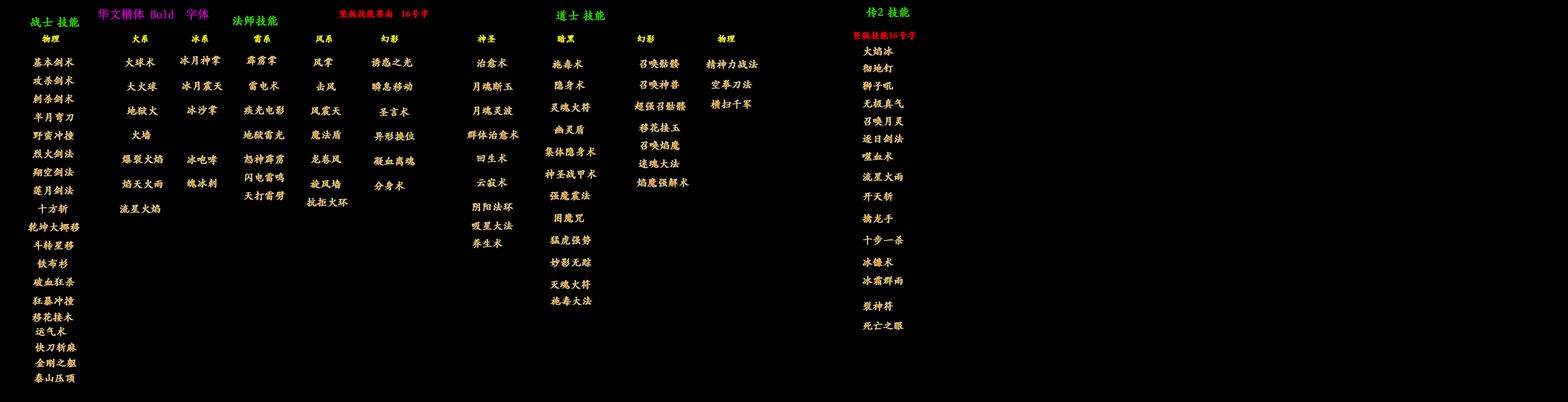
<style>
.page{position:relative;width:1568px;height:402px;background:#000000}
.page>*{position:absolute;margin:0}
.t1{font:11.8px "STKaiti-SC-Bold";color:#34d800;font-weight:bold}
.t2{font:11.8px "SimSun";color:#d900d9;font-weight:bold}
.t3{font:11.8px "STKaiti-SC-Bold";color:#33d800;font-weight:bold}
.t4{font:9.1px "STKaiti-SC-Bold";color:#ff0000;font-weight:bold}
.t5{font:9.1px "STKaiti-SC-Bold";color:#ffff26;font-weight:bold}
.t6{font:10.5px "STKaiti-SC-Bold";font-weight:bold}
.t7{font:10.5px "STKaiti-SC-Bold";color:#fcd788;font-weight:bold}
.t8{font:10.5px "STKaiti-SC-Bold";color:#ffdc8c;font-weight:bold}
.t9{font:10.5px "STKaiti-SC-Bold";color:#ffde8d;font-weight:bold}
</style>
<div class="page">
<p class="t1" style="left:30px;top:17px;width:50px;height:10px">战士 技能</p>
<p class="t2" style="left:97px;top:8px;width:112px;height:12px">华文楷体 Bold  字体</p>
<p class="t3" style="left:233px;top:16px;width:45px;height:11px">法师技能</p>
<p class="t4" style="left:339px;top:10px;width:90px;height:8px">竖版技能界面   16号字</p>
<p class="t3" style="left:556px;top:10px;width:50px;height:11px">道士 技能</p>
<p class="t3" style="left:866px;top:7px;width:44px;height:11px">传2 技能</p>
<p class="t5" style="left:42px;top:35px;width:18px;height:8px">物理</p>
<p class="t5" style="left:132px;top:35px;width:16px;height:8px">火系</p>
<p class="t5" style="left:191px;top:35px;width:17px;height:8px">冰系</p>
<p class="t5" style="left:253px;top:35px;width:17px;height:8px">雷系</p>
<p class="t5" style="left:316px;top:35px;width:17px;height:8px">风系</p>
<p class="t5" style="left:381px;top:35px;width:17px;height:8px">幻影</p>
<p class="t5" style="left:477px;top:35px;width:19px;height:8px">神圣</p>
<p class="t5" style="left:557px;top:35px;width:18px;height:8px">暗黑</p>
<p class="t5" style="left:637px;top:35px;width:17px;height:8px">幻影</p>
<p class="t5" style="left:717px;top:35px;width:19px;height:8px">物理</p>
<p class="t4" style="left:853px;top:31px;width:63px;height:9px">竖版技能16号字</p>
<p class="t6" style="left:863px;top:46px;width:31px;height:10px">火焰冰</p>
<p class="t6" style="left:33px;top:57px;width:41px;height:10px">基本剑术</p>
<p class="t6" style="left:125px;top:57px;width:30px;height:10px">火球术</p>
<p class="t6" style="left:180px;top:56px;width:41px;height:10px">冰月神掌</p>
<p class="t6" style="left:246px;top:56px;width:31px;height:10px">霹雳掌</p>
<p class="t6" style="left:313px;top:57px;width:20px;height:11px">风掌</p>
<p class="t6" style="left:371px;top:57px;width:42px;height:10px">诱惑之光</p>
<p class="t6" style="left:477px;top:58px;width:31px;height:10px">治愈术</p>
<p class="t6" style="left:552px;top:59px;width:31px;height:10px">施毒术</p>
<p class="t6" style="left:640px;top:59px;width:39px;height:10px">召唤骷髅</p>
<p class="t6" style="left:706px;top:59px;width:53px;height:11px">精神力战法</p>
<p class="t6" style="left:862px;top:63px;width:32px;height:10px">彻地钉</p>
<p class="t6" style="left:33px;top:76px;width:41px;height:10px">攻杀剑术</p>
<p class="t6" style="left:127px;top:82px;width:30px;height:9px">大火球</p>
<p class="t6" style="left:182px;top:81px;width:41px;height:10px">冰月震天</p>
<p class="t6" style="left:249px;top:81px;width:31px;height:10px">雷电术</p>
<p class="t7" style="left:316px;top:82px;width:20px;height:9px">击风</p>
<p class="t6" style="left:372px;top:82px;width:41px;height:10px">瞬息移动</p>
<p class="t6" style="left:472px;top:82px;width:41px;height:9px">月魂断玉</p>
<p class="t6" style="left:555px;top:80px;width:30px;height:10px">隐身术</p>
<p class="t6" style="left:640px;top:80px;width:39px;height:10px">召唤神兽</p>
<p class="t6" style="left:711px;top:80px;width:42px;height:10px">空拳刀法</p>
<p class="t6" style="left:862px;top:82px;width:31px;height:9px">狮子吼</p>
<p class="t6" style="left:33px;top:94px;width:41px;height:10px">刺杀剑术</p>
<p class="t6" style="left:634px;top:101px;width:52px;height:10px">超强召骷髅</p>
<p class="t6" style="left:710px;top:99px;width:42px;height:11px">横扫千军</p>
<p class="t6" style="left:862px;top:99px;width:42px;height:9px">无极真气</p>
<p class="t6" style="left:33px;top:112px;width:41px;height:11px">半月弯刀</p>
<p class="t6" style="left:127px;top:106px;width:31px;height:10px">地狱火</p>
<p class="t6" style="left:187px;top:105px;width:31px;height:11px">冰沙掌</p>
<p class="t6" style="left:244px;top:105px;width:40px;height:10px">疾光电影</p>
<p class="t6" style="left:310px;top:106px;width:32px;height:10px">风震天</p>
<p class="t6" style="left:379px;top:107px;width:31px;height:10px">圣言术</p>
<p class="t6" style="left:472px;top:106px;width:42px;height:10px">月魂灵波</p>
<p class="t6" style="left:550px;top:103px;width:41px;height:9px">灵魂火符</p>
<p class="t6" style="left:554px;top:125px;width:31px;height:10px">幽灵盾</p>
<p class="t6" style="left:639px;top:123px;width:41px;height:10px">移花接玉</p>
<p class="t6" style="left:864px;top:116px;width:40px;height:10px">召唤月灵</p>
<p class="t6" style="left:33px;top:131px;width:41px;height:9px">野蛮冲撞</p>
<p class="t6" style="left:131px;top:130px;width:20px;height:10px">火墙</p>
<p class="t6" style="left:243px;top:130px;width:42px;height:10px">地狱雷光</p>
<p class="t6" style="left:311px;top:130px;width:31px;height:10px">魔法盾</p>
<p class="t6" style="left:374px;top:131px;width:42px;height:11px">异形换位</p>
<p class="t6" style="left:467px;top:130px;width:52px;height:10px">群体治愈术</p>
<p class="t6" style="left:862px;top:134px;width:42px;height:10px">逐日剑法</p>
<p class="t8" style="left:33px;top:149px;width:41px;height:10px">烈火剑法</p>
<p class="t6" style="left:545px;top:147px;width:51px;height:10px">集体隐身术</p>
<p class="t6" style="left:640px;top:140px;width:40px;height:10px">召唤焰魔</p>
<p class="t6" style="left:122px;top:154px;width:41px;height:10px">爆裂火焰</p>
<p class="t6" style="left:187px;top:155px;width:31px;height:10px">冰咆哮</p>
<p class="t6" style="left:244px;top:154px;width:41px;height:11px">怒神霹雳</p>
<p class="t6" style="left:310px;top:154px;width:31px;height:10px">龙卷风</p>
<p class="t6" style="left:374px;top:156px;width:42px;height:11px">凝血离魂</p>
<p class="t6" style="left:477px;top:154px;width:31px;height:9px">回生术</p>
<p class="t6" style="left:638px;top:159px;width:42px;height:10px">迷魂大法</p>
<p class="t6" style="left:862px;top:152px;width:32px;height:9px">噬血术</p>
<p class="t6" style="left:33px;top:167px;width:41px;height:10px">翔空剑法</p>
<p class="t6" style="left:244px;top:172px;width:40px;height:10px">闪电雷鸣</p>
<p class="t6" style="left:545px;top:169px;width:52px;height:11px">神圣战甲术</p>
<p class="t6" style="left:862px;top:172px;width:41px;height:10px">流星火雨</p>
<p class="t6" style="left:33px;top:186px;width:41px;height:9px">莲月剑法</p>
<p class="t6" style="left:122px;top:179px;width:41px;height:10px">焰天火雨</p>
<p class="t6" style="left:187px;top:178px;width:30px;height:10px">魄冰刺</p>
<p class="t6" style="left:310px;top:179px;width:31px;height:10px">旋风墙</p>
<p class="t6" style="left:374px;top:181px;width:31px;height:10px">分身术</p>
<p class="t6" style="left:476px;top:178px;width:32px;height:10px">云寂术</p>
<p class="t6" style="left:637px;top:178px;width:52px;height:10px">焰魔强解术</p>
<p class="t6" style="left:244px;top:191px;width:41px;height:10px">天打雷劈</p>
<p class="t6" style="left:306px;top:197px;width:42px;height:10px">抗拒火环</p>
<p class="t6" style="left:550px;top:191px;width:41px;height:10px">强魔震法</p>
<p class="t6" style="left:863px;top:191px;width:30px;height:10px">开天斩</p>
<p class="t9" style="left:38px;top:204px;width:30px;height:10px">十方斩</p>
<p class="t6" style="left:120px;top:204px;width:41px;height:10px">流星火焰</p>
<p class="t6" style="left:472px;top:202px;width:41px;height:10px">阴阳法环</p>
<p class="t6" style="left:472px;top:221px;width:42px;height:10px">吸星大法</p>
<p class="t6" style="left:554px;top:213px;width:30px;height:10px">困魔咒</p>
<p class="t6" style="left:862px;top:214px;width:31px;height:9px">擒龙手</p>
<p class="t6" style="left:28px;top:222px;width:52px;height:11px">乾坤大挪移</p>
<p class="t6" style="left:33px;top:240px;width:41px;height:11px">斗转星移</p>
<p class="t6" style="left:472px;top:238px;width:31px;height:10px">养生术</p>
<p class="t6" style="left:549px;top:235px;width:42px;height:10px">猛虎强势</p>
<p class="t6" style="left:863px;top:235px;width:41px;height:10px">十步一杀</p>
<p class="t6" style="left:549px;top:257px;width:42px;height:10px">妙影无踪</p>
<p class="t6" style="left:862px;top:257px;width:32px;height:10px">冰镰术</p>
<p class="t6" style="left:37px;top:259px;width:31px;height:10px">铁布衫</p>
<p class="t6" style="left:33px;top:277px;width:41px;height:10px">破血狂杀</p>
<p class="t6" style="left:550px;top:280px;width:41px;height:9px">灭魂火符</p>
<p class="t6" style="left:862px;top:276px;width:41px;height:10px">冰霜群雨</p>
<p class="t6" style="left:32px;top:296px;width:42px;height:10px">狂暴冲撞</p>
<p class="t6" style="left:551px;top:296px;width:42px;height:10px">施毒大法</p>
<p class="t6" style="left:862px;top:301px;width:31px;height:11px">裂神符</p>
<p class="t6" style="left:32px;top:312px;width:42px;height:10px">移花接木</p>
<p class="t6" style="left:35px;top:327px;width:32px;height:9px">运气术</p>
<p class="t6" style="left:862px;top:321px;width:42px;height:10px">死亡之眼</p>
<p class="t6" style="left:35px;top:342px;width:42px;height:10px">快刀斩麻</p>
<p class="t6" style="left:35px;top:358px;width:41px;height:10px">金刚之躯</p>
<p class="t6" style="left:34px;top:373px;width:40px;height:10px">泰山压顶</p>
</div>
